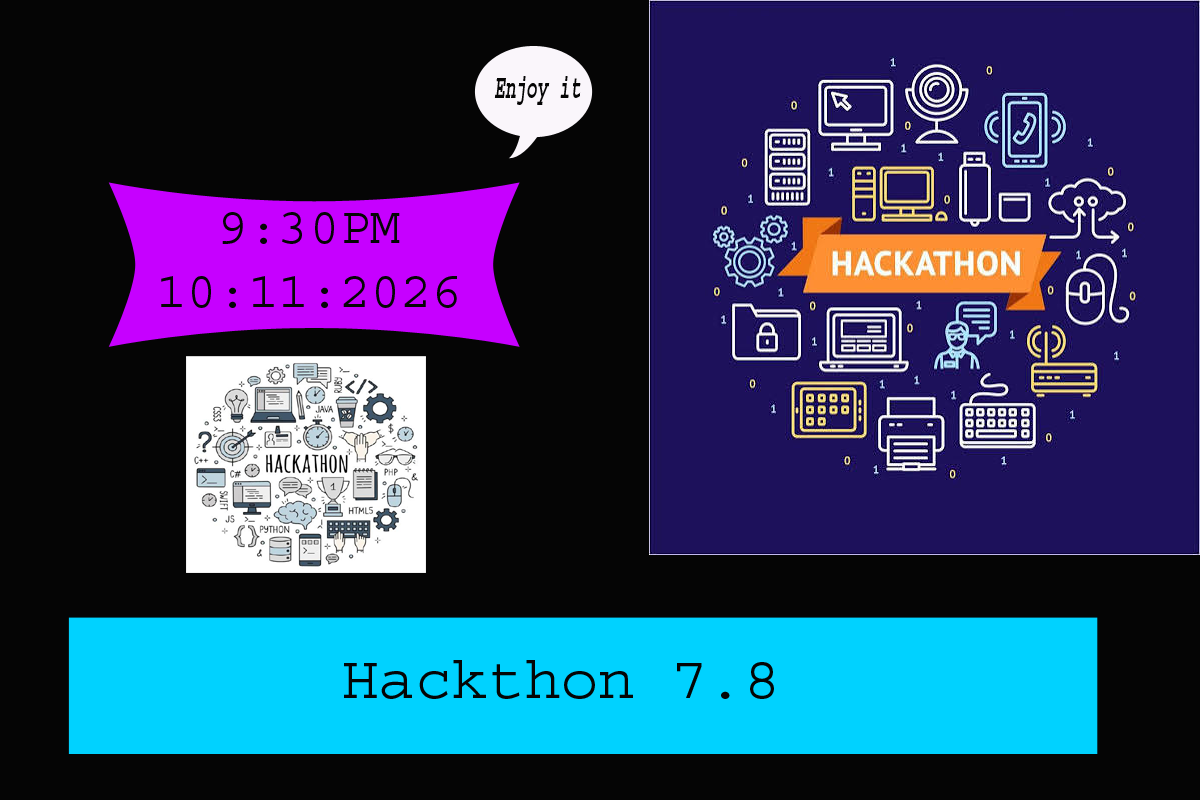
<style>
.page{position:relative;width:1200px;height:800px;background:#050505}
.page>*{position:absolute;margin:0}
.t1{font:33.8px "Courier-BoldOblique";color:#050505;scale:0.53 1}
.t2{font:52.9px "Courier";color:#050505;scale:0.97 1}
.t3{font:61px "Courier";color:#050505}
</style>
<div class="page">
<p class="t1" style="left:494px;top:76px;width:87px;height:29px">Enjoy it</p>
<p class="t2" style="left:161px;top:212px;width:296px;height:96px">9:30PM<br>10:11:2026</p>
<p class="t3" style="left:344px;top:660px;width:430px;height:39px">Hackthon 7.8</p>
</div>
